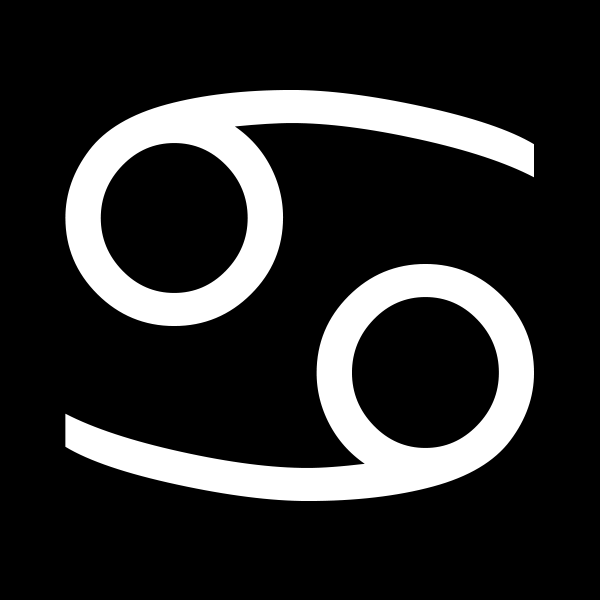
<style>
.page{position:relative;width:600px;height:600px;background:#000000}
.page>*{position:absolute;margin:0}
.t1{font:588px "ArialUnicodeMS";color:#ffffff}
</style>
<div class="page">
<p class="t1" style="left:65px;top:90px;width:469px;height:411px">♋︎</p>
</div>
